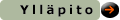
<style>
.page{position:relative;width:120px;height:20px;background:#aeb99f}
.page>*{position:absolute;margin:0}
.t1{font:12px "Verdana-Bold";letter-spacing:0.26em;color:#000000}
</style>
<div class="page">
<p class="t1" style="left:20px;top:4px;width:73px;height:13px">Ylläpito</p>
<p class="t1" style="left:20px;top:4px;width:73px;height:13px">Ylläpito</p>
</div>
